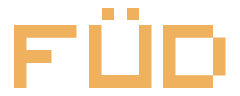
<style>
.page{position:relative;width:240px;height:96px;background:#ffffff}
.page>*{position:absolute;margin:0}
.t1{font:125px "VisitorTT1BRK";color:#efb15d}
</style>
<div class="page">
<p class="t1" style="left:14px;top:25px;width:212px;height:63px">Fud</p>
</div>
